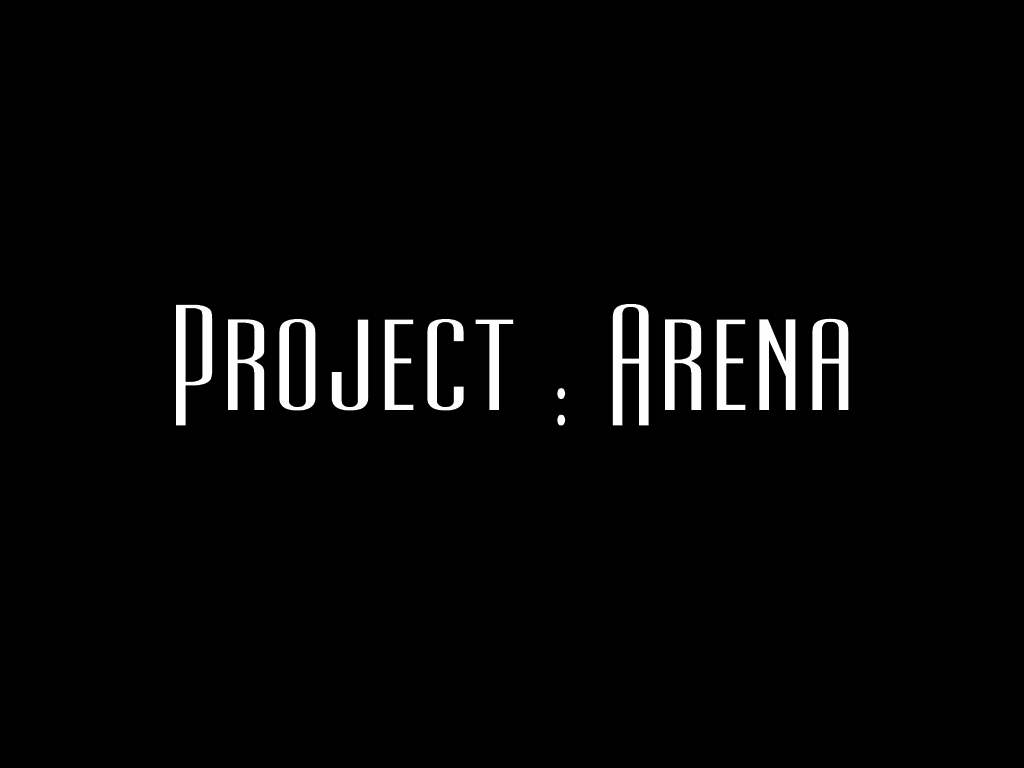
<style>
.page{position:relative;width:1024px;height:768px;background:#000000}
.page>*{position:absolute;margin:0}
.t1{font:142px "UltraCondensedSansSerif";letter-spacing:-0.005em;color:#fefefe}
</style>
<div class="page">
<p class="t1" style="left:176px;top:304px;width:673px;height:122px">Project : Arena</p>
</div>
